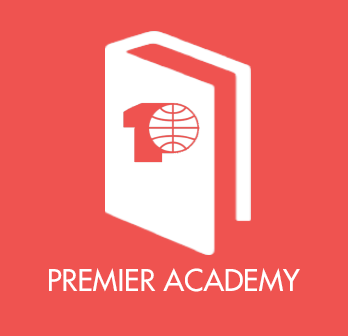
<style>
.page{position:relative;width:348px;height:336px;background:#ef5350}
.page>*{position:absolute;margin:0}
.t1{font:29.2px "FuturaLT";color:#ffffff}
</style>
<div class="page">
<p class="t1" style="left:49px;top:268px;width:251px;height:24px">PREMIER ACADEMY</p>
</div>
